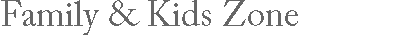
<style>
.page{position:relative;width:400px;height:35px;background:#ffffff}
.page>*{position:absolute;margin:0}
.t1{font:36px "ACaslonPro-Regular";color:#666666}
</style>
<div class="page">
<p class="t1" style="left:1px;top:0px;width:297px;height:36px">Family &amp; Kids Zone</p>
</div>
